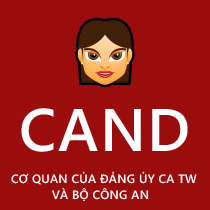
<style>
.page{position:relative;width:210px;height:210px;background:#9b0d0d}
.page>*{position:absolute;margin:0}
.t1{font:60px "SegoeWP-Semibold";letter-spacing:0.025em;color:#ffffff}
.t2{font:12px "SegoeWP-Semibold";letter-spacing:0.025em;color:#fefefe}
</style>
<div class="page">
<p class="t1" style="left:21px;top:108px;width:167px;height:44px">CAND</p>
<p class="t2" style="left:11px;top:171px;width:186px;height:14px">CƠ QUAN CỦA ĐẢNG ỦY CA TW</p>
<p class="t2" style="left:52px;top:188px;width:97px;height:13px">VÀ BỘ CÔNG AN</p>
</div>
